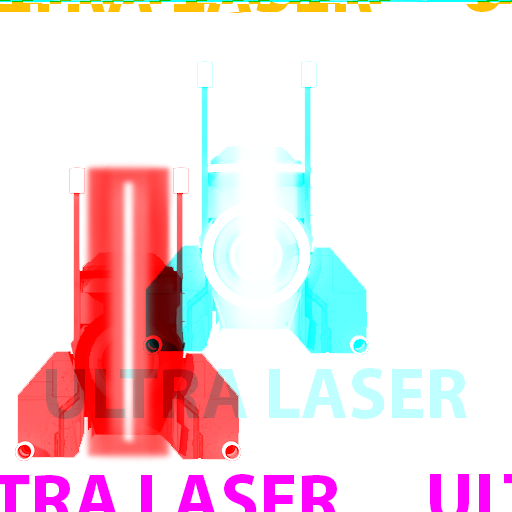
<style>
.page{position:relative;width:512px;height:512px;background:#ffffff}
.page>*{position:absolute;margin:0}
.t1{font:72px "MyriadPro-Bold"}
</style>
<div class="page">
<p class="t1" style="left:46px;top:366px;width:421px;height:51px">ULTRA LASER</p>
</div>
